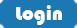
<style>
.page{position:relative;width:77px;height:28px;background:#1b78b3}
.page>*{position:absolute;margin:0}
.t1{font:20.3px "Bauhaus93";color:#ffffff}
</style>
<div class="page">
<p class="t1" style="left:16px;top:5px;width:46px;height:20px">Login</p>
</div>
